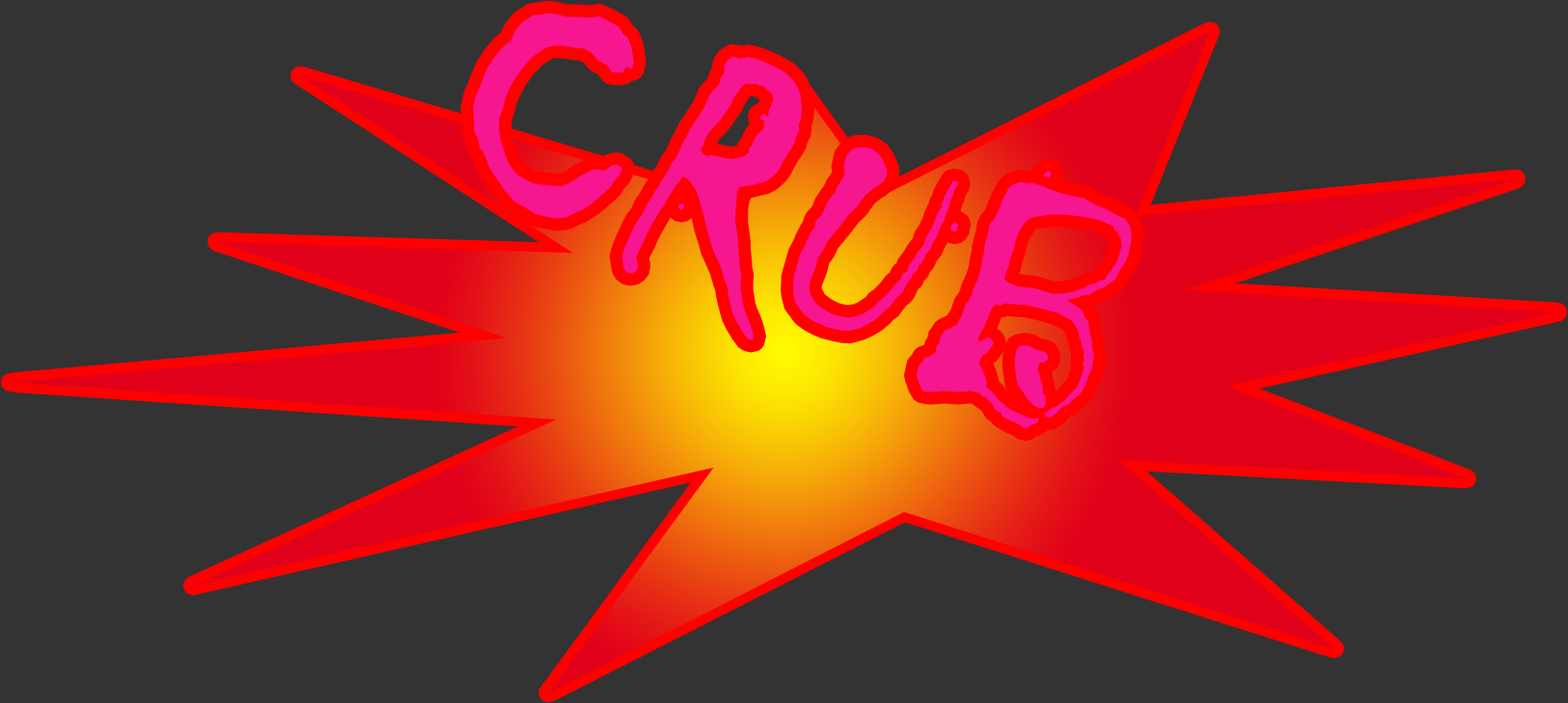
<style>
.page{position:relative;width:1568px;height:703px;background:#333333}
.page>*{position:absolute;margin:0}
.t1{font:353.3px "Chiller-Regular";color:#f6168f;font-weight:bold}
</style>
<div class="page">
<p class="t1" style="left:473px;top:13px;width:659px;height:416px;rotate:23deg">CRUB</p>
</div>
